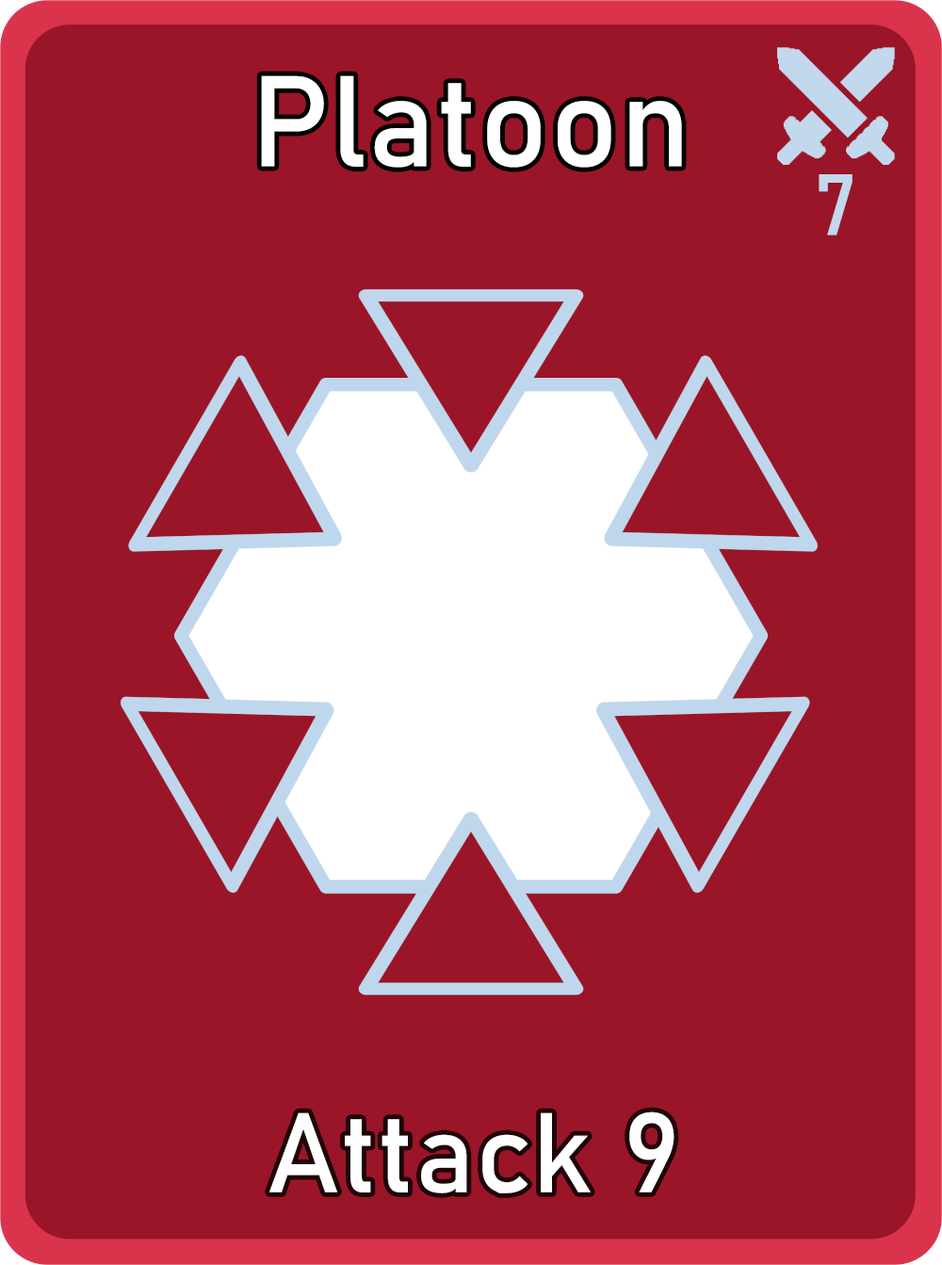
<style>
.page{position:relative;width:942px;height:1265px;background:#9a1527}
.page>*{position:absolute;margin:0}
.t1{font:126.7px "Bahnschrift";letter-spacing:0.01em;color:#ffffff}
.t2{font:85px "Bahnschrift";letter-spacing:0.01em;color:#c1d8ed}
.t3{font:111.3px "Bahnschrift";letter-spacing:0.01em;color:#ffffff}
</style>
<div class="page">
<p class="t1" style="left:261px;top:75px;width:421px;height:93px">Platoon</p>
<p class="t2" style="left:819px;top:174px;width:34px;height:62px">7</p>
<p class="t3" style="left:269px;top:1112px;width:406px;height:82px">Attack 9</p>
</div>
